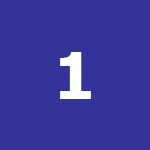
<style>
.page{position:relative;width:150px;height:150px;background:#333399}
.page>*{position:absolute;margin:0}
.t1{font:64px "Tahoma-Bold";color:#ffffff}
</style>
<div class="page">
<p class="t1" style="left:60px;top:52px;width:31px;height:47px">1</p>
</div>
